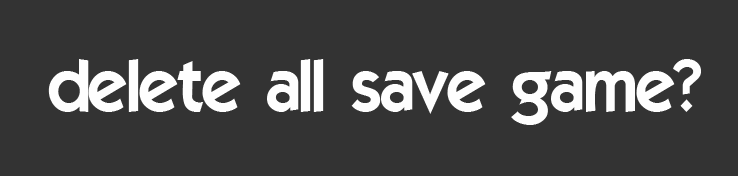
<style>
.page{position:relative;width:738px;height:176px;background:#333333}
.page>*{position:absolute;margin:0}
.t1{font:72px "ELEGANCE";color:#fefefe}
</style>
<div class="page">
<p class="t1" style="left:48px;top:59px;width:653px;height:66px">delete all save game?</p>
</div>
